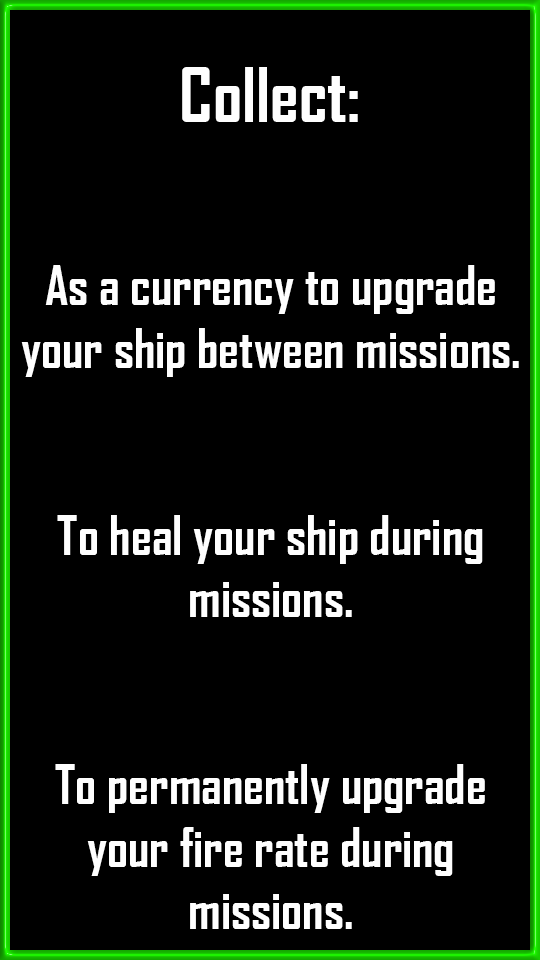
<style>
.page{position:relative;width:540px;height:960px;background:#000000}
.page>*{position:absolute;margin:0}
.t1{font:72px "AgencyFB-Bold";color:#fefefe}
.t2{font:52px "AgencyFB-Bold";color:#fefefe}
</style>
<div class="page">
<p class="t1" style="left:182px;top:67px;width:176px;height:55px">Collect:</p>
<p class="t2" style="left:21px;top:265px;width:498px;height:664px;text-align:center">As a currency to upgrade<br>your ship between missions.<br><br><br>To heal your ship during<br>missions.<br><br><br>To permanently upgrade<br>your fire rate during<br>missions.</p>
</div>
